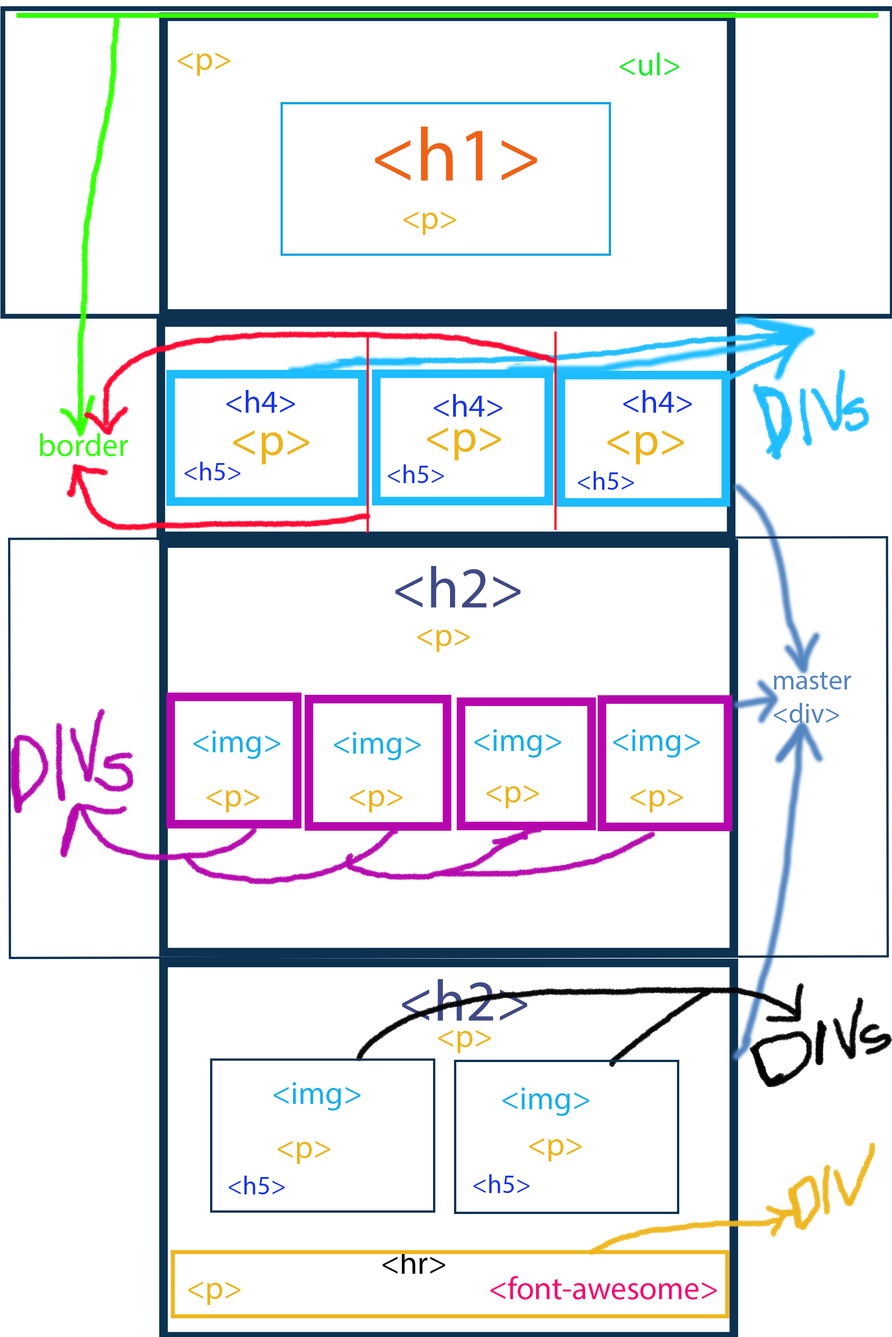
<style>
.page{position:relative;width:892px;height:1337px;background:#ffffff}
.page>*{position:absolute;margin:0}
.t1{font:32.1px "MyriadPro-Regular";color:#eeb316}
.t2{font:32.1px "MyriadPro-Regular";color:#16ee2a}
.t3{font:76px "MyriadPro-Regular";color:#ee6216}
.t4{font:32.1px "MyriadPro-Regular";color:#1634ee}
.t5{font:32.1px "MyriadPro-Regular";color:#30ff02}
.t6{font:46.5px "MyriadPro-Regular";color:#eeb316}
.t7{font:45.1px "MyriadPro-Regular";color:#eeb316}
.t8{font:46.7px "MyriadPro-Regular";color:#eeb316}
.t9{font:26px "MyriadPro-Regular";color:#1634ee}
.t10{font:58.6px "MyriadPro-Regular";color:#3f4985}
.t11{font:27.8px "MyriadPro-Regular";color:#5385c1}
.t12{font:32.1px "MyriadPro-Regular";color:#16aeee}
.t13{font:32.1px "MyriadPro-Regular";color:#000000}
.t14{font:32.1px "MyriadPro-Regular";color:#f90270}
</style>
<div class="page">
<p class="t1" style="left:177px;top:52px;width:53px;height:24px">&lt;p&gt;</p>
<p class="t2" style="left:619px;top:53px;width:60px;height:23px">&lt;ul&gt;</p>
<p class="t3" style="left:375px;top:127px;width:162px;height:54px">&lt;h1&gt;</p>
<p class="t1" style="left:403px;top:211px;width:53px;height:24px">&lt;p&gt;</p>
<p class="t4" style="left:226px;top:390px;width:69px;height:23px">&lt;h4&gt;</p>
<p class="t4" style="left:433px;top:394px;width:69px;height:23px">&lt;h4&gt;</p>
<p class="t4" style="left:623px;top:390px;width:68px;height:23px">&lt;h4&gt;</p>
<p class="t5" style="left:40px;top:433px;width:88px;height:24px">border</p>
<p class="t6" style="left:233px;top:430px;width:76px;height:35px">&lt;p&gt;</p>
<p class="t7" style="left:427px;top:428px;width:74px;height:33px">&lt;p&gt;</p>
<p class="t8" style="left:607px;top:430px;width:77px;height:35px">&lt;p&gt;</p>
<p class="t9" style="left:184px;top:462px;width:56px;height:19px">&lt;h5&gt;</p>
<p class="t9" style="left:387px;top:465px;width:57px;height:18px">&lt;h5&gt;</p>
<p class="t9" style="left:577px;top:471px;width:56px;height:19px">&lt;h5&gt;</p>
<p class="t10" style="left:395px;top:566px;width:125px;height:42px">&lt;h2&gt;</p>
<p class="t1" style="left:417px;top:629px;width:52px;height:23px">&lt;p&gt;</p>
<p class="t11" style="left:773px;top:672px;width:78px;height:51px">master <br>&lt;div&gt;</p>
<p class="t12" style="left:193px;top:731px;width:87px;height:28px">&lt;img&gt;</p>
<p class="t12" style="left:333px;top:732px;width:87px;height:29px">&lt;img&gt;</p>
<p class="t12" style="left:474px;top:729px;width:87px;height:29px">&lt;img&gt;</p>
<p class="t12" style="left:613px;top:729px;width:86px;height:29px">&lt;img&gt;</p>
<p class="t1" style="left:486px;top:785px;width:53px;height:24px">&lt;p&gt;</p>
<p class="t1" style="left:206px;top:789px;width:53px;height:24px">&lt;p&gt;</p>
<p class="t1" style="left:350px;top:789px;width:52px;height:24px">&lt;p&gt;</p>
<p class="t1" style="left:630px;top:789px;width:53px;height:24px">&lt;p&gt;</p>
<p class="t10" style="left:402px;top:979px;width:125px;height:42px">&lt;h2&gt;</p>
<p class="t1" style="left:438px;top:1030px;width:52px;height:23px">&lt;p&gt;</p>
<p class="t12" style="left:273px;top:1082px;width:87px;height:29px">&lt;img&gt;</p>
<p class="t12" style="left:502px;top:1088px;width:87px;height:28px">&lt;img&gt;</p>
<p class="t1" style="left:277px;top:1141px;width:53px;height:23px">&lt;p&gt;</p>
<p class="t1" style="left:529px;top:1138px;width:52px;height:24px">&lt;p&gt;</p>
<p class="t9" style="left:228px;top:1176px;width:56px;height:19px">&lt;h5&gt;</p>
<p class="t9" style="left:473px;top:1175px;width:56px;height:18px">&lt;h5&gt;</p>
<p class="t13" style="left:382px;top:1251px;width:63px;height:23px">&lt;hr&gt;</p>
<p class="t14" style="left:490px;top:1276px;width:226px;height:24px">&lt;font-awesome&gt;</p>
<p class="t1" style="left:188px;top:1282px;width:52px;height:23px">&lt;p&gt;</p>
</div>
